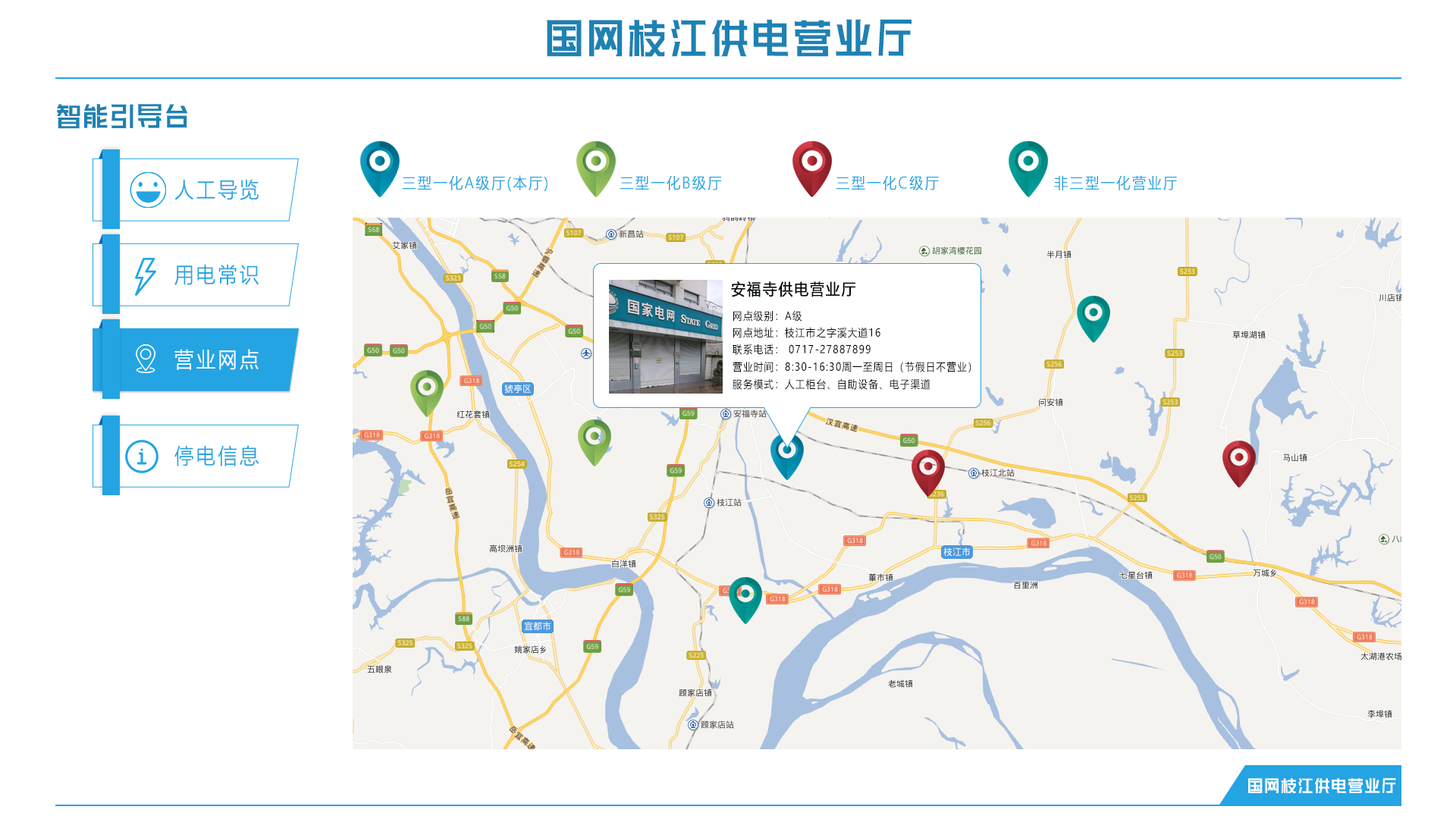
<style>
.page{position:relative;width:1456px;height:819px;background:#ffffff}
.page>*{position:absolute;margin:0}
.t1{font:61.3px "HuXiaoBoKuHei";letter-spacing:0.1em;color:#1d82b4;scale:0.61 1}
.t2{font:40.1px "HuXiaoBoKuHei";letter-spacing:0.1em;color:#1d82b4;scale:0.61 1}
.t3{font:21.4px "MicrosoftYaHeiLight";letter-spacing:0.1em;color:#24a4e3;font-weight:bold;scale:0.9 1}
.t4{font:15.4px "MicrosoftYaHeiLight";letter-spacing:0.1em;color:#24a4e3;font-weight:bold;scale:0.9 1}
.t5{font:15.8px "MicrosoftYaHei";letter-spacing:0.1em;color:#02090d;font-weight:bold;scale:0.89 1}
.t6{font:10.8px "MicrosoftYaHei";letter-spacing:0.1em;color:#02090d;scale:0.88 1}
.t7{font:21.4px "MicrosoftYaHeiLight";letter-spacing:0.1em;color:#ffffff;font-weight:bold;scale:0.9 1}
.t8{font:24.8px "HuXiaoBoKuHei";letter-spacing:0.1em;color:#ffffff;scale:0.61 1}
</style>
<div class="page">
<p class="t1" style="left:547px;top:19px;width:365px;height:38px">国网枝江供电营业厅</p>
<p class="t2" style="left:57px;top:104px;width:131px;height:25px">智能引导台</p>
<p class="t3" style="left:174px;top:179px;width:85px;height:21px">人工导览</p>
<p class="t4" style="left:402px;top:175px;width:146px;height:16px">三型一化A级厅(本厅)</p>
<p class="t4" style="left:620px;top:176px;width:101px;height:14px">三型一化B级厅</p>
<p class="t4" style="left:836px;top:176px;width:103px;height:14px">三型一化C级厅</p>
<p class="t4" style="left:1054px;top:175px;width:123px;height:15px">非三型一化营业厅</p>
<p class="t3" style="left:174px;top:264px;width:85px;height:21px">用电常识</p>
<p class="t5" style="left:731px;top:281px;width:124px;height:16px">安福寺供电营业厅</p>
<p class="t6" style="left:733px;top:310px;width:69px;height:12px">网点级别：A级</p>
<p class="t6" style="left:733px;top:327px;width:147px;height:11px">网点地址：枝江市之字溪大道16</p>
<p class="t7" style="left:174px;top:349px;width:85px;height:21px">营业网点</p>
<p class="t6" style="left:733px;top:344px;width:138px;height:11px">联系电话： 0717-27887899</p>
<p class="t6" style="left:733px;top:361px;width:238px;height:12px">营业时间：8:30-16:30周一至周日（节假日不营业）</p>
<p class="t6" style="left:733px;top:378px;width:197px;height:12px">服务模式：人工柜台、自助设备、电子渠道</p>
<p class="t3" style="left:174px;top:445px;width:85px;height:21px">停电信息</p>
<p class="t8" style="left:1247px;top:778px;width:149px;height:16px">国网枝江供电营业厅</p>
</div>
